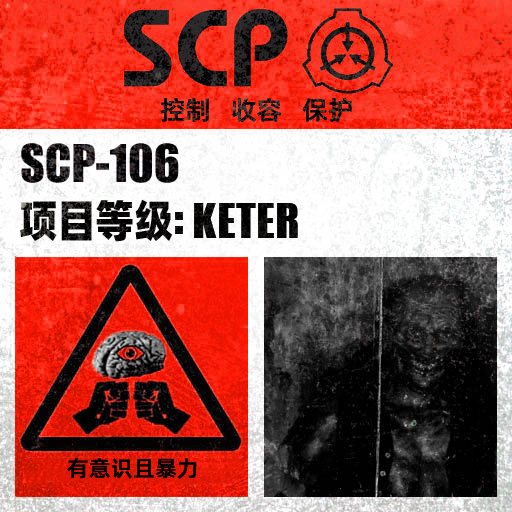
<style>
.page{position:relative;width:512px;height:512px}
.page>*{position:absolute;margin:0}
.t1{font:26px "AlibabaPuHuiTiM"}
.t2{font:52px "URWImpactW01-Bold";letter-spacing:0.02em;color:#000000}
.t3{font:44px "AlibabaPuHuiTiH";letter-spacing:-0.02em;color:#000000;scale:0.9 1}
.t4{font:44px "AlibabaPuHuiTiH";color:#000000;scale:0.9 1}
.t5{font:62px "URWImpactW01-Bold";color:#000000}
.t6{font:22px "AlibabaPuHuiTiM";letter-spacing:0.02em;color:#000000}
</style>
<div class="page">
<p class="t1" style="left:160px;top:97px;width:192px;height:26px">控制   收容   保护</p>
<p class="t2" style="left:20px;top:199px;width:278px;height:43px"><span class="t3">项目等</span><span class="t4">级</span><span class="t5">: </span>KETER</p>
<p class="t6" style="left:67px;top:458px;width:130px;height:21px">有意识且暴力</p>
</div>
